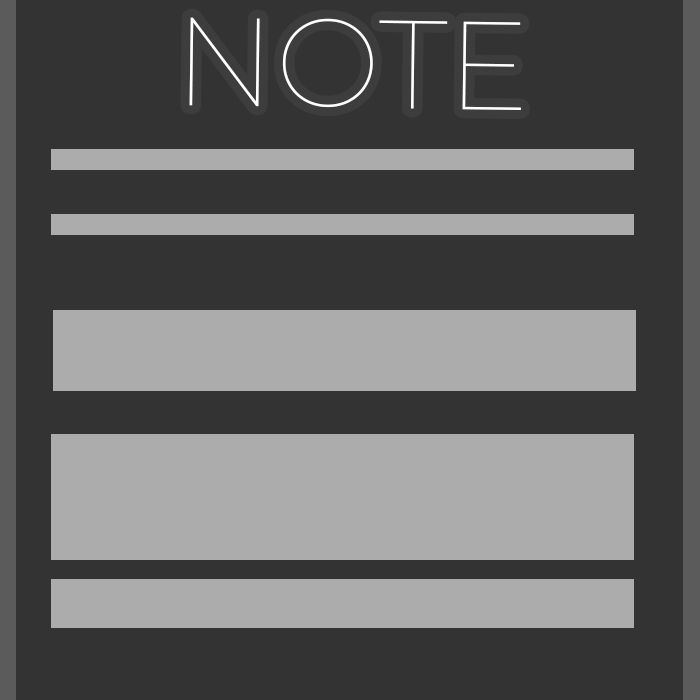
<style>
.page{position:relative;width:700px;height:700px;background:#333333}
.page>*{position:absolute;margin:0}
.t1{font:125px "Montserrat-Thin";color:#ffffff}
</style>
<div class="page">
<p class="t1" style="left:189px;top:17px;width:332px;height:93px;rotate:1deg">NOTE</p>
</div>
